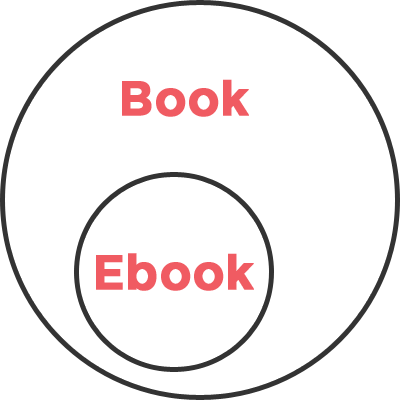
<style>
.page{position:relative;width:400px;height:400px;background:#ffffff}
.page>*{position:absolute;margin:0}
.t1{font:48px "Gotham-Bold";color:#f05b62;font-weight:bold}
</style>
<div class="page">
<p class="t1" style="left:122px;top:79px;width:127px;height:38px">Book</p>
<p class="t1" style="left:96px;top:253px;width:158px;height:38px">Ebook</p>
</div>
